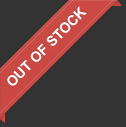
<style>
.page{position:relative;width:126px;height:127px;background:#333333}
.page>*{position:absolute;margin:0}
.t1{font:14px "Arial-BoldMT";color:#ffffff;text-transform:uppercase}
</style>
<div class="page">
<p class="t1" style="left:7px;top:6px;width:80px;height:80px;rotate:-45deg">Out of stock</p>
</div>
